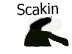
<style>
.page{position:relative;width:72px;height:54px;background:#ffffff}
.page>*{position:absolute;margin:0}
.t1{font:15px "Tahoma";color:#000000}
</style>
<div class="page">
<p class="t1" style="left:17px;top:2px;width:42px;height:14px;rotate:-1deg">Scakin</p>
</div>
